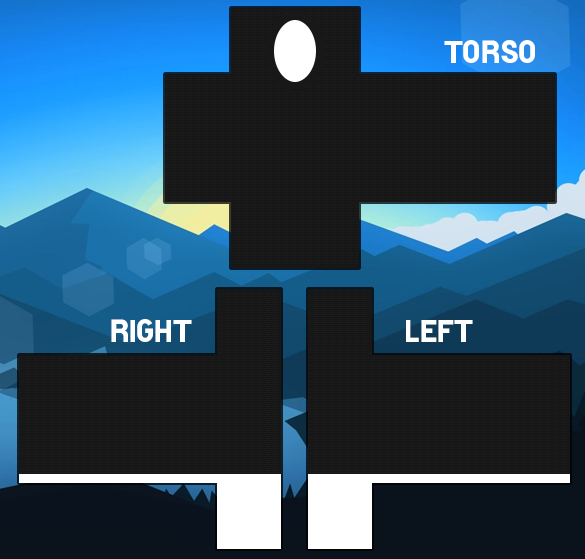
<style>
.page{position:relative;width:585px;height:559px;background:#181818}
.page>*{position:absolute;margin:0}
.t1{font:32px "HotelDeParisXe";color:#ffffff}
</style>
<div class="page">
<p class="t1" style="left:444px;top:40px;width:91px;height:23px">Torso</p>
<p class="t1" style="left:111px;top:319px;width:81px;height:23px">Right</p>
<p class="t1" style="left:406px;top:320px;width:67px;height:22px">Left</p>
</div>
